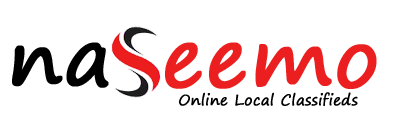
<style>
.page{position:relative;width:400px;height:120px;background:#ffffff}
.page>*{position:absolute;margin:0}
.t1{font:80px "SegoePrint";color:#000000;font-weight:bold}
.t2{font:80px "SegoePrint";color:#eb1f1f;font-weight:bold}
.t3{font:14.7px "SegoePrint";color:#000000;font-weight:bold}
</style>
<div class="page">
<p class="t1" style="left:12px;top:42px;width:97px;height:46px">na</p>
<p class="t2" style="left:165px;top:42px;width:212px;height:47px">eemo</p>
<p class="t3" style="left:179px;top:92px;width:179px;height:14px">Online Local Classifieds</p>
</div>
